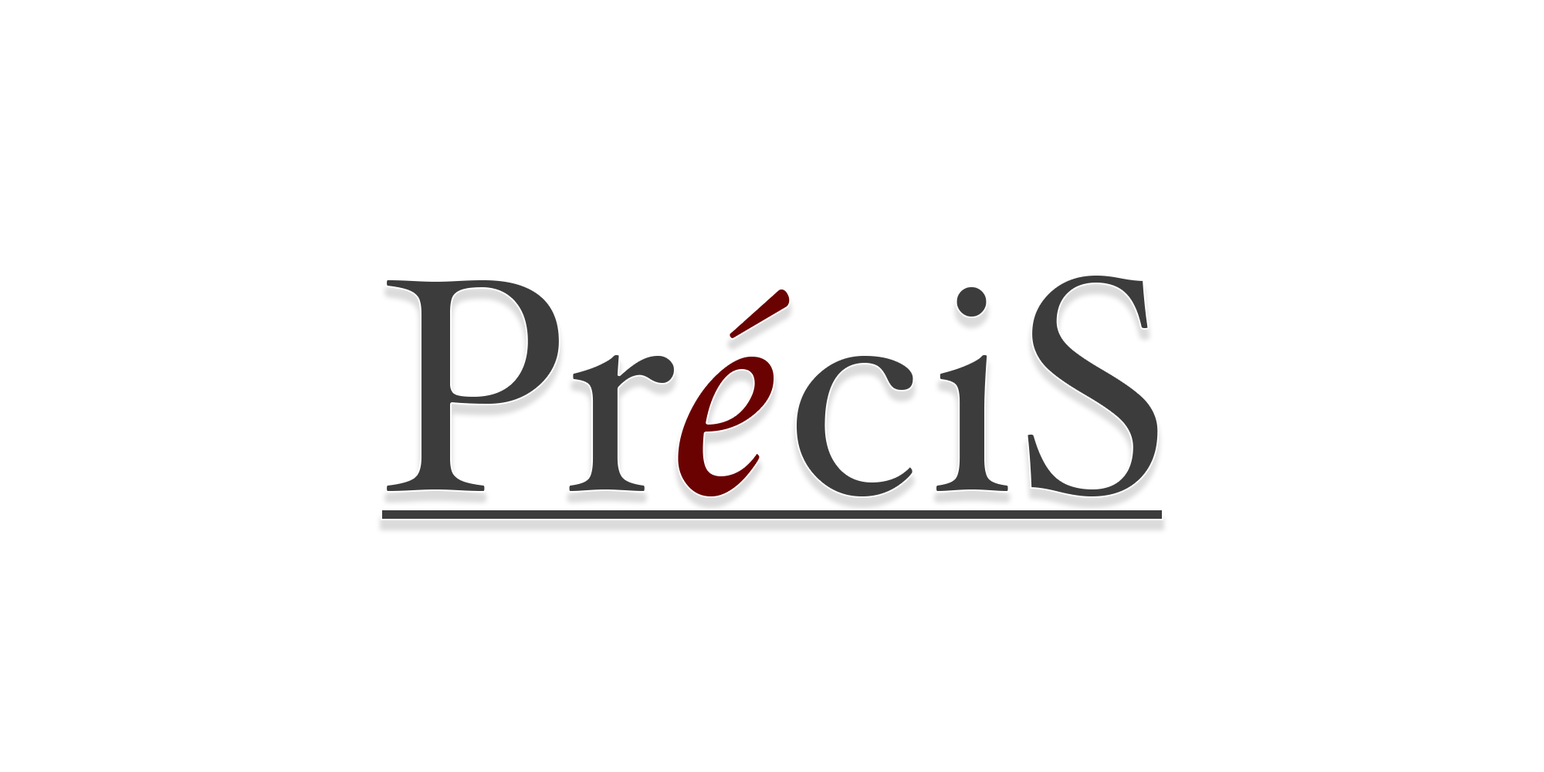
<style>
.page{position:relative;width:1544px;height:772px;background:#ffffff}
.page>*{position:absolute;margin:0}
.t1{font:308.9px "HoeflerText-Regular";color:#3c3c3c}
.t2{font:308.9px "HoeflerText-Italic";color:#6a0202}
</style>
<div class="page">
<p class="t1" style="left:385px;top:274px;width:775px;height:224px">Pr<span class="t2">é</span>ciS</p>
</div>
